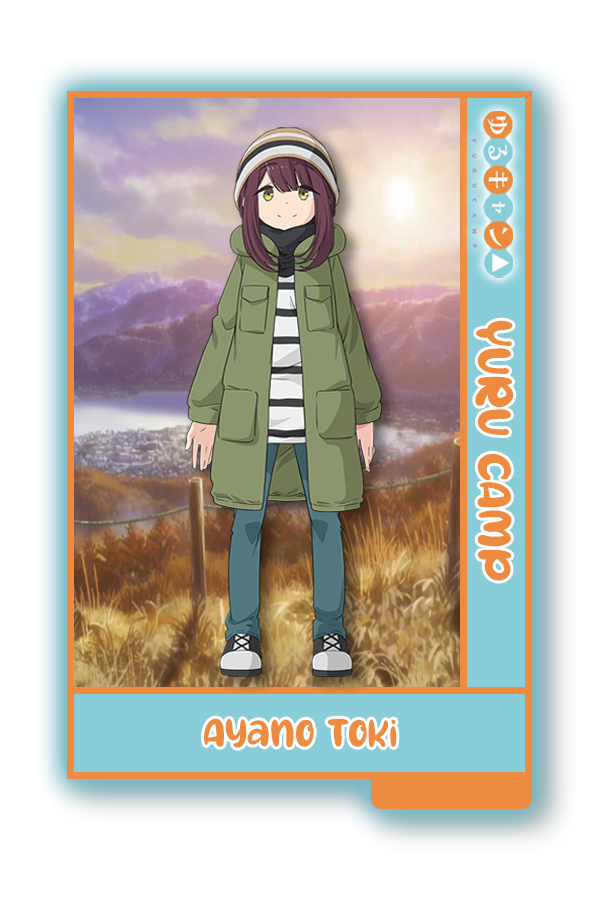
<style>
.page{position:relative;width:600px;height:900px;background:#ffffff}
.page>*{position:absolute;margin:0}
.t1{font:48.8px "OhMyBaby";color:#ed8c41}
.t2{font:41.1px "OhMyBaby";color:#ed8c41;scale:0.94 1}
</style>
<div class="page">
<p class="t1" style="left:475px;top:320px;width:39px;height:261px;rotate:90deg">YURU CAMP</p>
<p class="t2" style="left:203px;top:718px;width:194px;height:30px">Ayano Toki</p>
</div>
